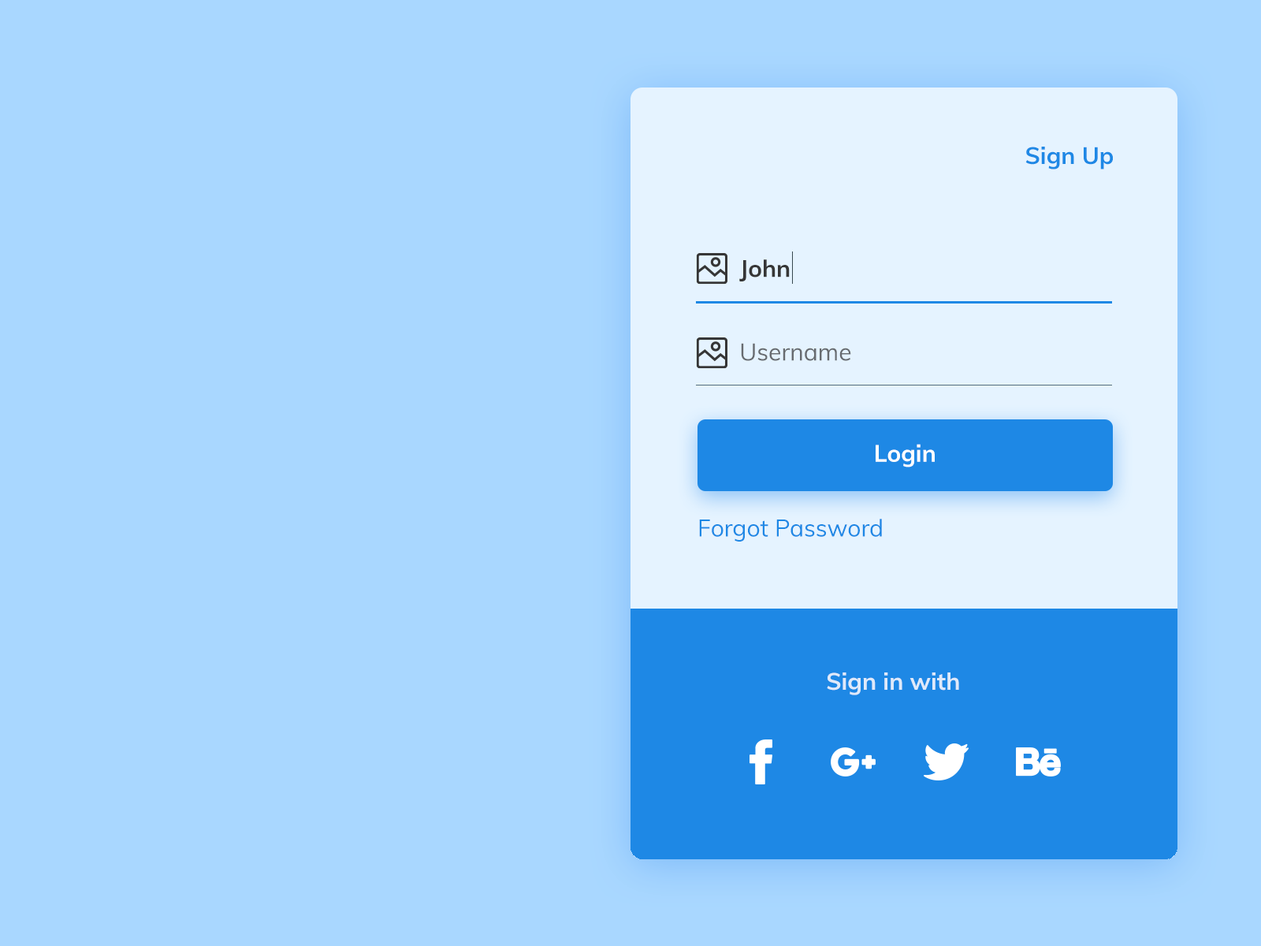
<style>
.page{position:relative;width:1261px;height:946px;background:#a9d7ff}
.page>*{position:absolute;margin:0}
.t1{font:23.6px "Muli-Bold";color:#1e88e5}
.t2{font:23.6px "Muli-Bold";color:#363636}
.t3{font:23.6px "Muli-Regular";color:#676b6f}
.t4{font:23.6px "Muli-Bold";color:#ffffff}
.t5{font:23.6px "Muli-Regular";color:#1e88e5}
.t6{font:23.6px "Muli-Bold";color:#dfeafa}
</style>
<div class="page">
<p class="t1" style="left:1025px;top:147px;width:88px;height:22px">Sign Up</p>
<p class="t2" style="left:739px;top:259px;width:51px;height:22px">John</p>
<p class="t3" style="left:741px;top:343px;width:110px;height:18px">Username</p>
<p class="t4" style="left:876px;top:444px;width:59px;height:23px">Login</p>
<p class="t5" style="left:699px;top:519px;width:183px;height:22px">Forgot Password</p>
<p class="t6" style="left:827px;top:672px;width:132px;height:23px">Sign in with</p>
</div>
